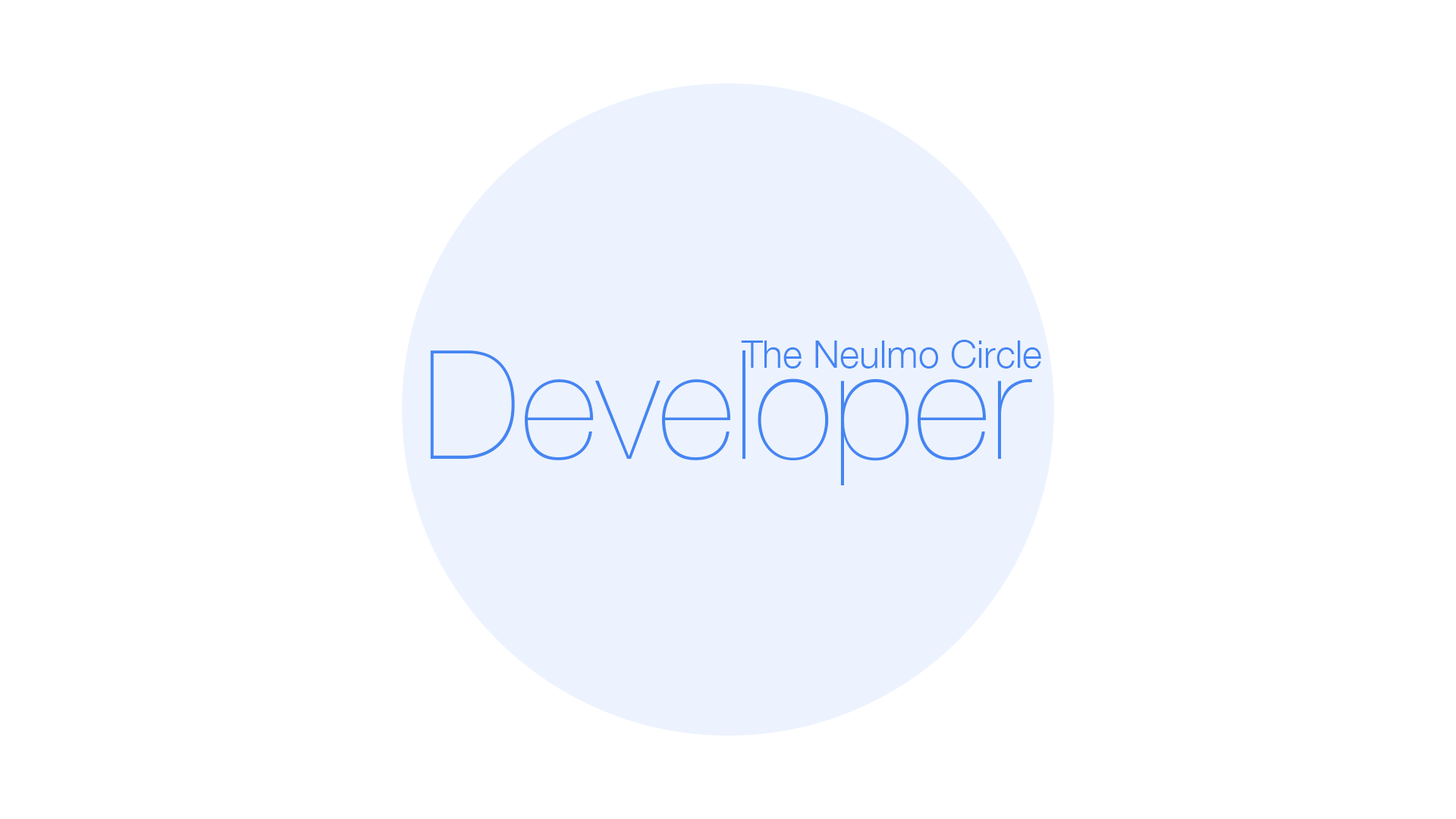
<style>
.page{position:relative;width:1456px;height:819px;background:#ffffff}
.page>*{position:absolute;margin:0}
.t1{font:37.9px "HelveticaNeue-Light";color:#4585f2}
.t2{font:151.7px "HelveticaNeue-UltraLight";color:#4585f2}
</style>
<div class="page">
<p class="t1" style="left:741px;top:340px;width:300px;height:29px">The Neulmo Circle</p>
<p class="t2" style="left:430px;top:350px;width:602px;height:135px">Developer</p>
</div>
